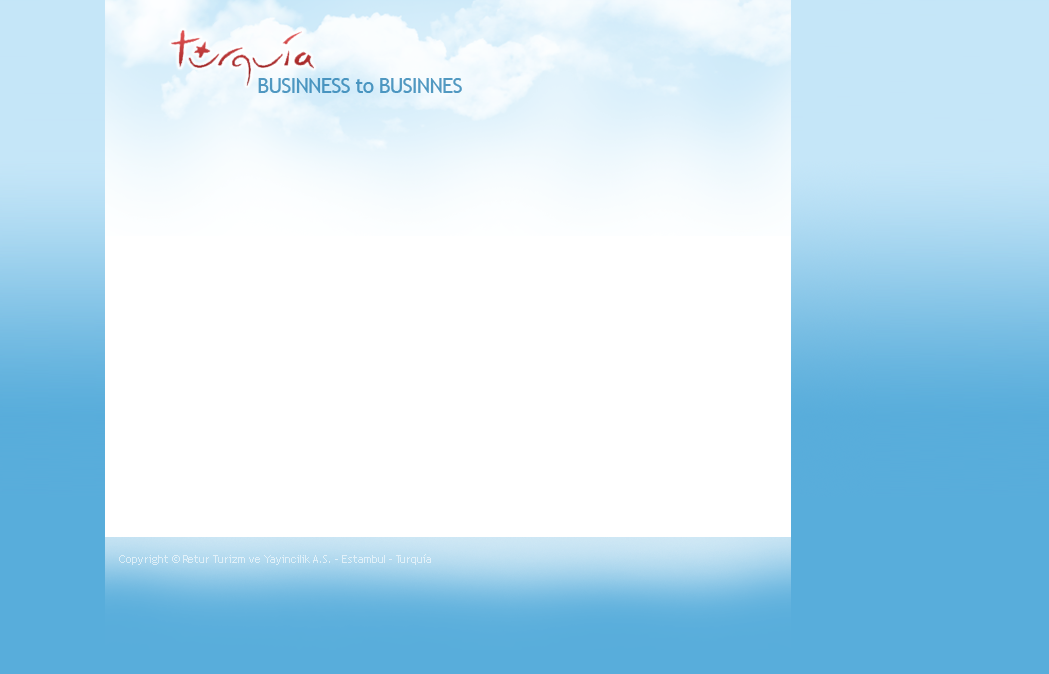
<style>
.page{position:relative;width:1049px;height:674px;background:#ffffff}
.page>*{position:absolute;margin:0}
.t1{font:21.1px "TrebuchetMS";letter-spacing:-0.04em;color:#4f97c1}
.t2{font:11px "TrebuchetMS";color:#e0f0f8}
</style>
<div class="page">
<p class="t1" style="left:258px;top:78px;width:204px;height:15px">BUSINNESS to BUSINNES</p>
<p class="t2" style="left:119px;top:554px;width:312px;height:11px">Copyright © Retur Turizm ve Yayincilik A.S. - Estambul - Turquía</p>
</div>
